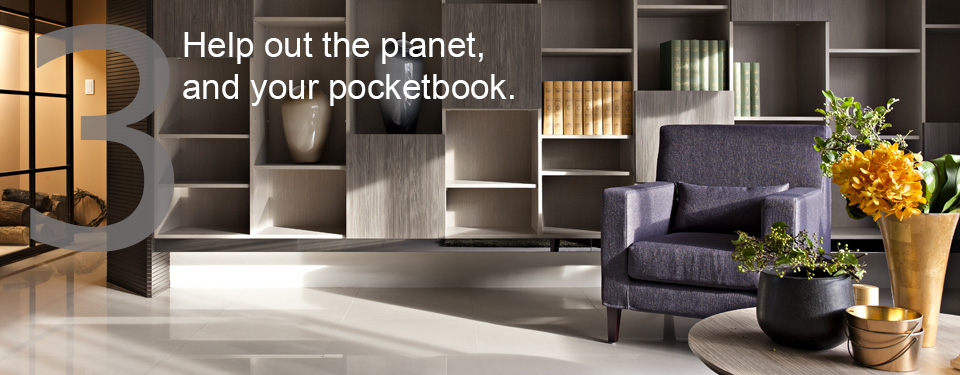
<style>
.page{position:relative;width:960px;height:375px}
.page>*{position:absolute;margin:0}
.t1{font:300px "Verdana";color:#787575}
.t2{font:35px "ArialUnicodeMS";color:#ffffff}
</style>
<div class="page">
<p class="t1" style="left:30px;top:24px;width:145px;height:228px;opacity:0.8">3</p>
<p class="t2" style="left:183px;top:32px;width:331px;height:74px">Help out the planet,<br>and your pocketbook.</p>
</div>
